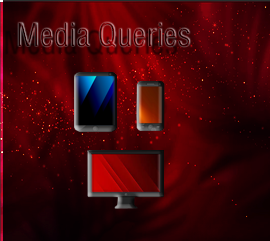
<style>
.page{position:relative;width:270px;height:241px}
.page>*{position:absolute;margin:0}
.t1{font:31.2px "HelveticaLTStd-Cond"}
</style>
<div class="page">
<p class="t1" style="left:18px;top:22px;width:172px;height:25px">Media Queries</p>
</div>
